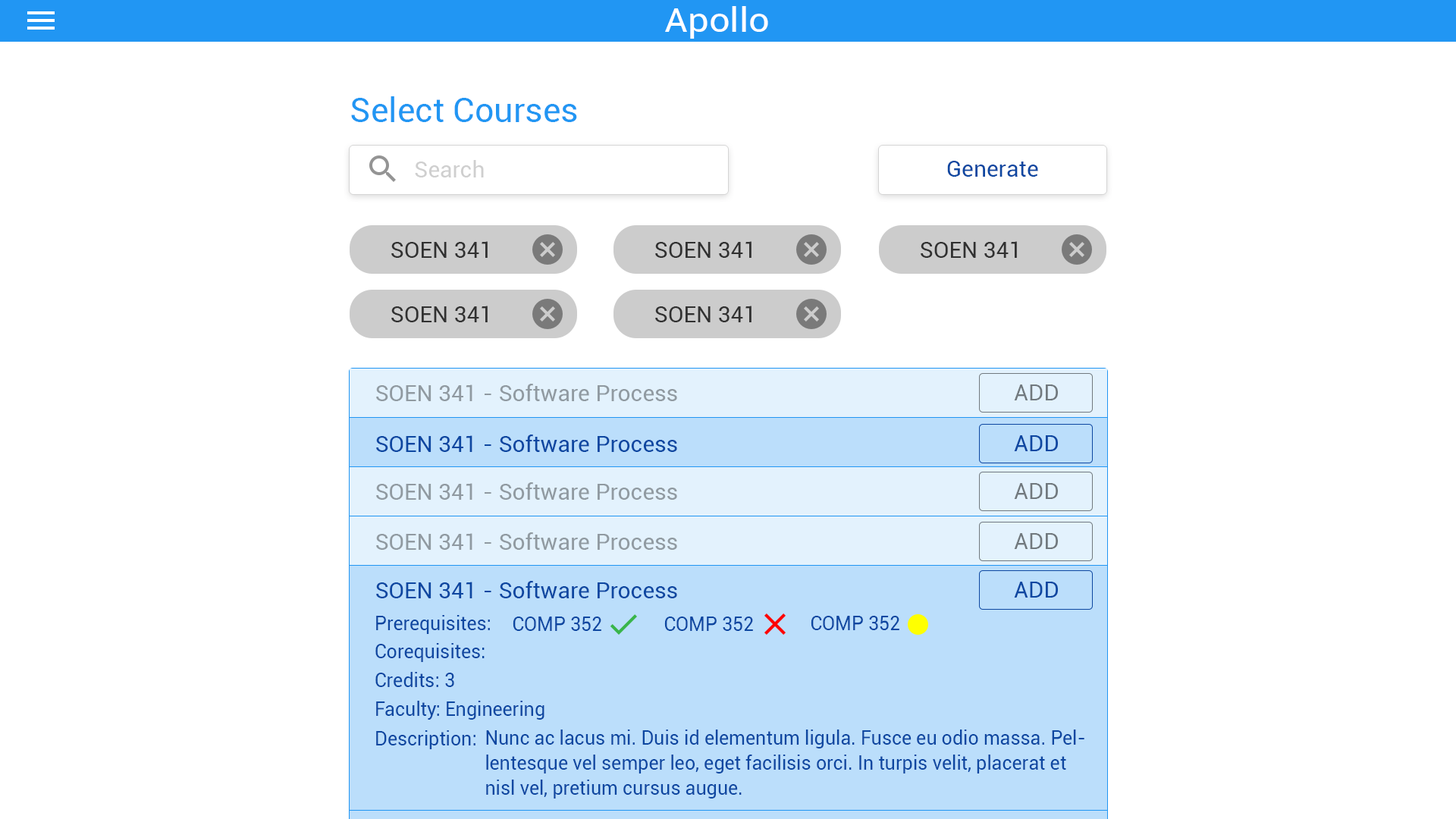
<style>
.page{position:relative;width:1456px;height:819px;background:#ffffff}
.page>*{position:absolute;margin:0}
.t1{font:34.1px "Roboto-Regular";color:#ffffff;scale:1.08 1}
.t2{font:34.1px "Roboto-Regular";color:#2196f3}
.t3{font:22.7px "Roboto-Regular";color:#cfcfcf}
.t4{font:22.7px "Roboto-Regular";color:#0d47a1}
.t5{font:22.7px "Roboto-Regular";color:#313131}
.t6{font:22.7px "Roboto-Regular";color:#909aa1}
.t7{font:22.7px "Roboto-Regular";color:#71797e}
.t8{font:19px "Roboto-Regular";color:#0d47a1}
.t9{font:19px/25px "Roboto-Regular";color:#0d47a1}
</style>
<div class="page">
<p class="t1" style="left:665px;top:6px;width:103px;height:33px">Apollo</p>
<p class="t2" style="left:351px;top:96px;width:226px;height:26px">Select Courses</p>
<p class="t3" style="left:415px;top:160px;width:69px;height:17px">Search</p>
<p class="t4" style="left:947px;top:161px;width:91px;height:16px">Generate</p>
<p class="t5" style="left:391px;top:241px;width:97px;height:17px">SOEN 341</p>
<p class="t5" style="left:655px;top:241px;width:96px;height:17px">SOEN 341</p>
<p class="t5" style="left:921px;top:241px;width:96px;height:17px">SOEN 341</p>
<p class="t5" style="left:391px;top:306px;width:97px;height:16px">SOEN 341</p>
<p class="t5" style="left:655px;top:306px;width:96px;height:16px">SOEN 341</p>
<p class="t6" style="left:376px;top:384px;width:301px;height:17px">SOEN 341 - Software Process</p>
<p class="t7" style="left:1014px;top:384px;width:44px;height:16px">ADD</p>
<p class="t4" style="left:376px;top:435px;width:301px;height:17px">SOEN 341 - Software Process</p>
<p class="t4" style="left:1014px;top:435px;width:44px;height:16px">ADD</p>
<p class="t6" style="left:376px;top:482px;width:301px;height:18px">SOEN 341 - Software Process</p>
<p class="t7" style="left:1014px;top:483px;width:44px;height:16px">ADD</p>
<p class="t6" style="left:376px;top:532px;width:301px;height:18px">SOEN 341 - Software Process</p>
<p class="t7" style="left:1014px;top:533px;width:44px;height:16px">ADD</p>
<p class="t4" style="left:376px;top:581px;width:301px;height:17px">SOEN 341 - Software Process</p>
<p class="t4" style="left:1014px;top:582px;width:44px;height:16px">ADD</p>
<p class="t8" style="left:376px;top:615px;width:114px;height:19px">Prerequisites:</p>
<p class="t8" style="left:513px;top:617px;width:88px;height:14px">COMP 352</p>
<p class="t8" style="left:664px;top:617px;width:89px;height:14px">COMP 352</p>
<p class="t8" style="left:811px;top:616px;width:88px;height:14px">COMP 352</p>
<p class="t8" style="left:375px;top:643px;width:110px;height:19px">Corequisites:</p>
<p class="t8" style="left:375px;top:672px;width:79px;height:15px">Credits: 3</p>
<p class="t8" style="left:376px;top:701px;width:168px;height:19px">Faculty: Engineering</p>
<p class="t8" style="left:376px;top:730px;width:99px;height:19px">Description:</p>
<p class="t9" style="left:486px;top:730px;width:598px;height:69px">Nunc ac lacus mi. Duis id elementum ligula. Fusce eu odio massa. Pellentesque vel semper leo, eget facilisis orci. In turpis velit, placerat et nisl vel, pretium cursus augue.</p>
</div>
